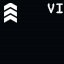
<style>
.page{position:relative;width:64px;height:64px;background:#030709}
.page>*{position:absolute;margin:0}
.t1{font:12px "OCRABeckerRUS-LAT";color:#ffffff}
</style>
<div class="page">
<p class="t1" style="left:47px;top:3px;width:16px;height:11px">VI</p>
</div>
